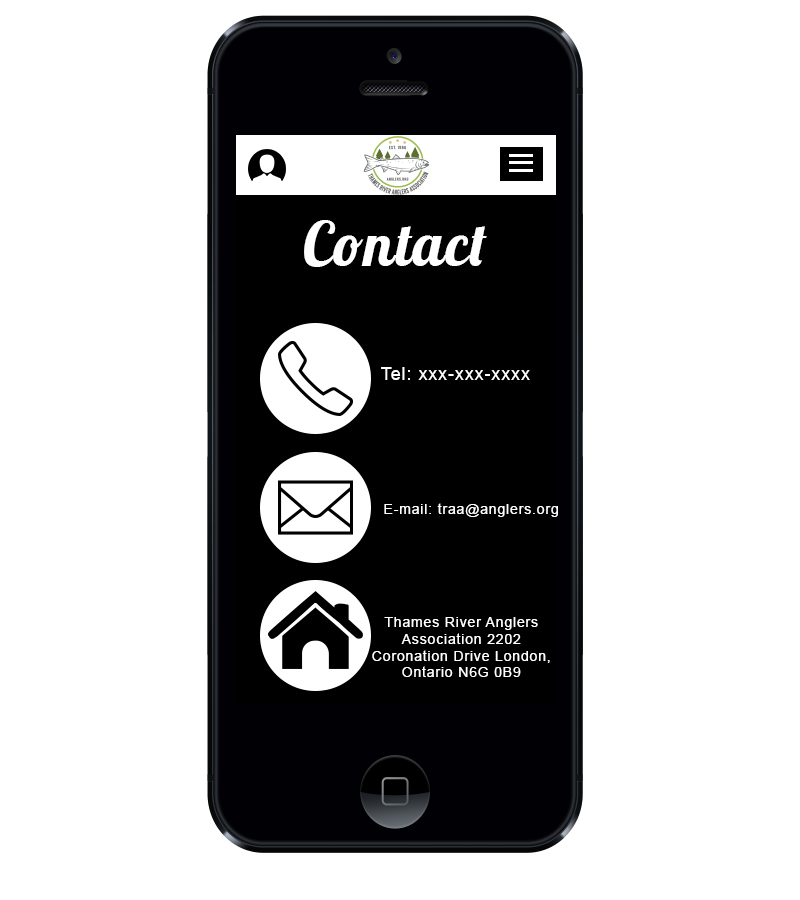
<style>
.page{position:relative;width:800px;height:900px;background:#ffffff}
.page>*{position:absolute;margin:0}
.t1{font:60px "Lobster-Regular";letter-spacing:0.02em;color:#ffffff}
.t2{font:17.6px "ArialMT";letter-spacing:0.06em;color:#ffffff}
.t3{font:14px "ArialMT";letter-spacing:0.06em;color:#ffffff}
.t4{font:14px/16.7px "ArialMT";letter-spacing:0.06em;color:#ffffff}
</style>
<div class="page">
<p class="t1" style="left:304px;top:220px;width:183px;height:47px">Contact</p>
<p class="t2" style="left:381px;top:367px;width:149px;height:13px">Tel: xxx-xxx-xxxx</p>
<p class="t3" style="left:384px;top:503px;width:174px;height:14px">E-mail: traa@anglers.org</p>
<p class="t4" style="left:372px;top:617px;width:178px;height:60px;text-align:center">Thames River Anglers Association 2202 Coronation Drive London, Ontario N6G 0B9</p>
</div>
